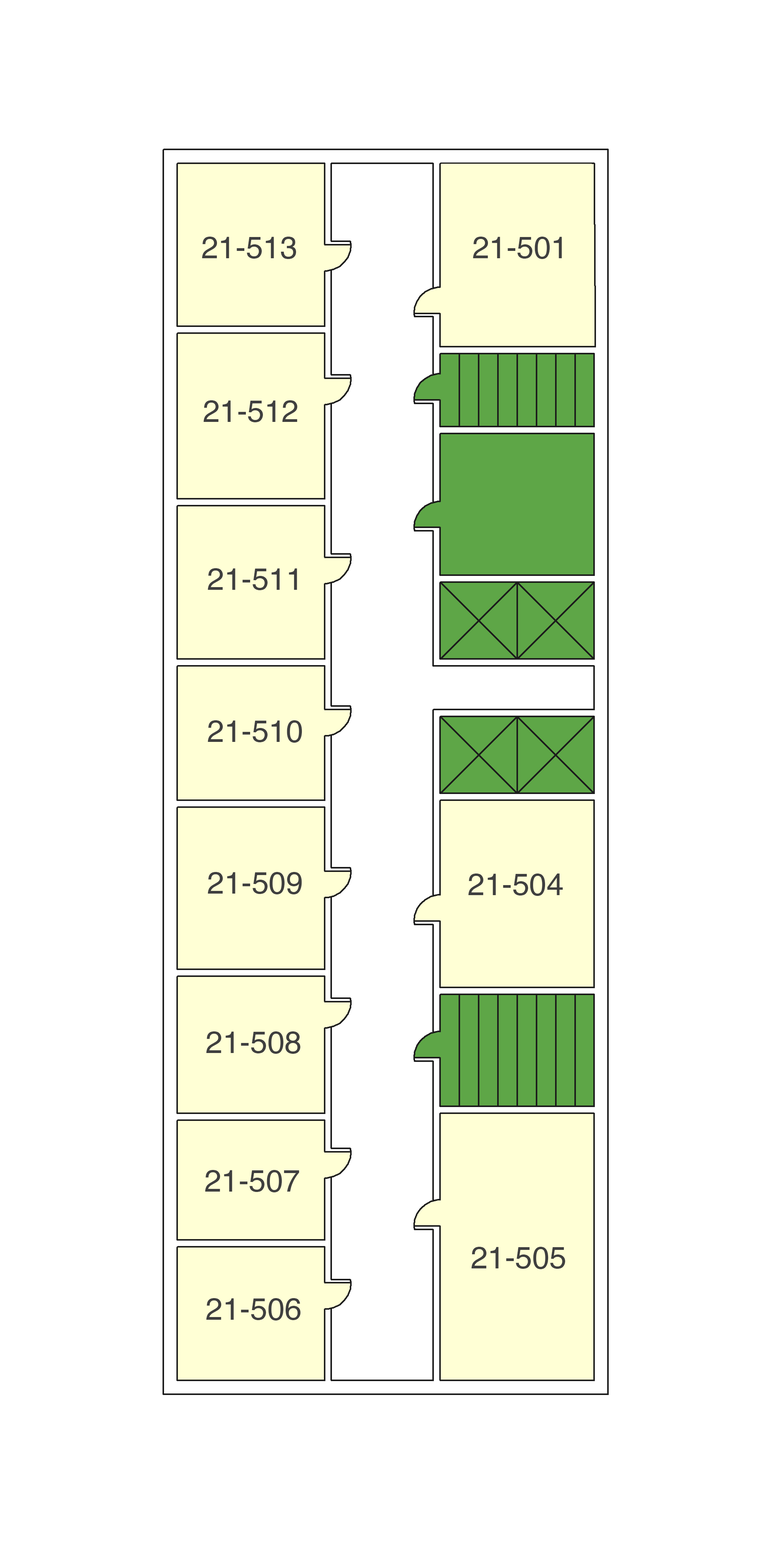
<style>
.page{position:relative;width:772px;height:1544px;background:#ffffff}
.page>*{position:absolute;margin:0}
.t1{font:30.9px "Helvetica";color:#3f3f3f}
</style>
<div class="page">
<p class="t1" style="left:202px;top:237px;width:94px;height:22px">21-513</p>
<p class="t1" style="left:473px;top:237px;width:89px;height:22px">21-501</p>
<p class="t1" style="left:203px;top:400px;width:95px;height:22px">21-512</p>
<p class="t1" style="left:208px;top:568px;width:89px;height:22px">21-511</p>
<p class="t1" style="left:208px;top:720px;width:94px;height:23px">21-510</p>
<p class="t1" style="left:208px;top:872px;width:94px;height:23px">21-509</p>
<p class="t1" style="left:468px;top:874px;width:95px;height:22px">21-504</p>
<p class="t1" style="left:206px;top:1032px;width:94px;height:22px">21-508</p>
<p class="t1" style="left:205px;top:1170px;width:94px;height:23px">21-507</p>
<p class="t1" style="left:471px;top:1247px;width:95px;height:22px">21-505</p>
<p class="t1" style="left:206px;top:1298px;width:95px;height:23px">21-506</p>
</div>
